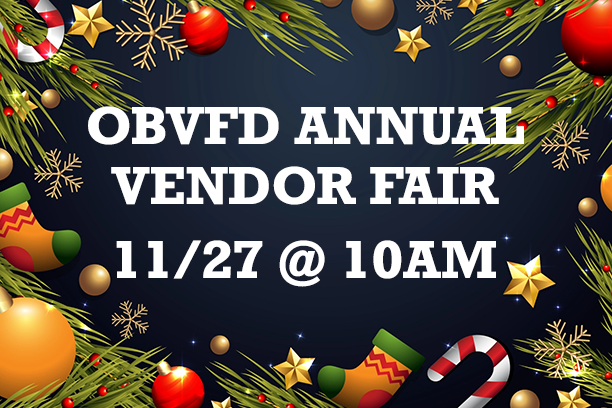
<style>
.page{position:relative;width:612px;height:408px}
.page>*{position:absolute;margin:0}
.t1{font:50px "Rockwell-Bold";color:#ffffff}
</style>
<div class="page">
<p class="t1" style="left:88px;top:106px;width:436px;height:99px;text-align:center">OBVFD ANNUAL<br>VENDOR FAIR</p>
<p class="t1" style="left:116px;top:240px;width:380px;height:47px">11/27 @ 10AM</p>
</div>
